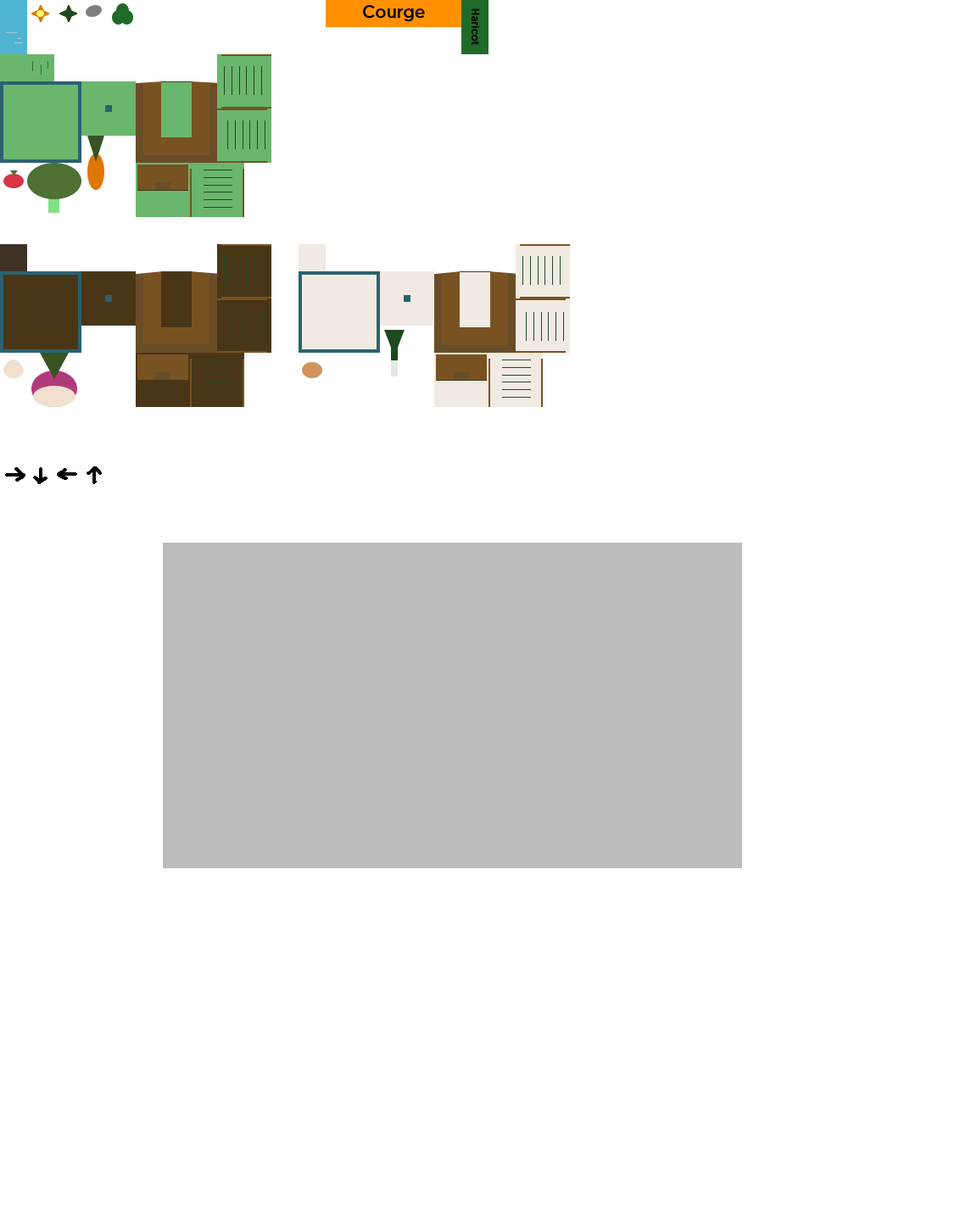
<style>
.page{position:relative;width:977px;height:1221px;background:#ffffff}
.page>*{position:absolute;margin:0}
.t1{font:17.7px "MADETOMMY";color:#000000;font-weight:bold}
.t2{font:10.6px "MADETOMMY";color:#000000;font-weight:bold}
</style>
<div class="page">
<p class="t1" style="left:363px;top:5px;width:62px;height:17px">Courge</p>
<p class="t2" style="left:471px;top:8px;width:9px;height:37px;rotate:90deg">Haricot</p>
</div>
